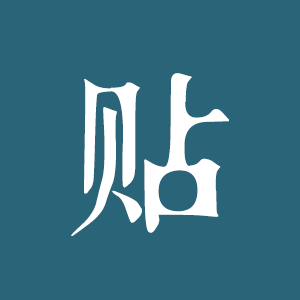
<style>
.page{position:relative;width:300px;height:300px;background:#296479}
.page>*{position:absolute;margin:0}
.t1{font:170px "TpldKhangXiDictTrial";color:#ffffff}
</style>
<div class="page">
<p class="t1" style="left:71px;top:73px;width:158px;height:163px">贴</p>
</div>
